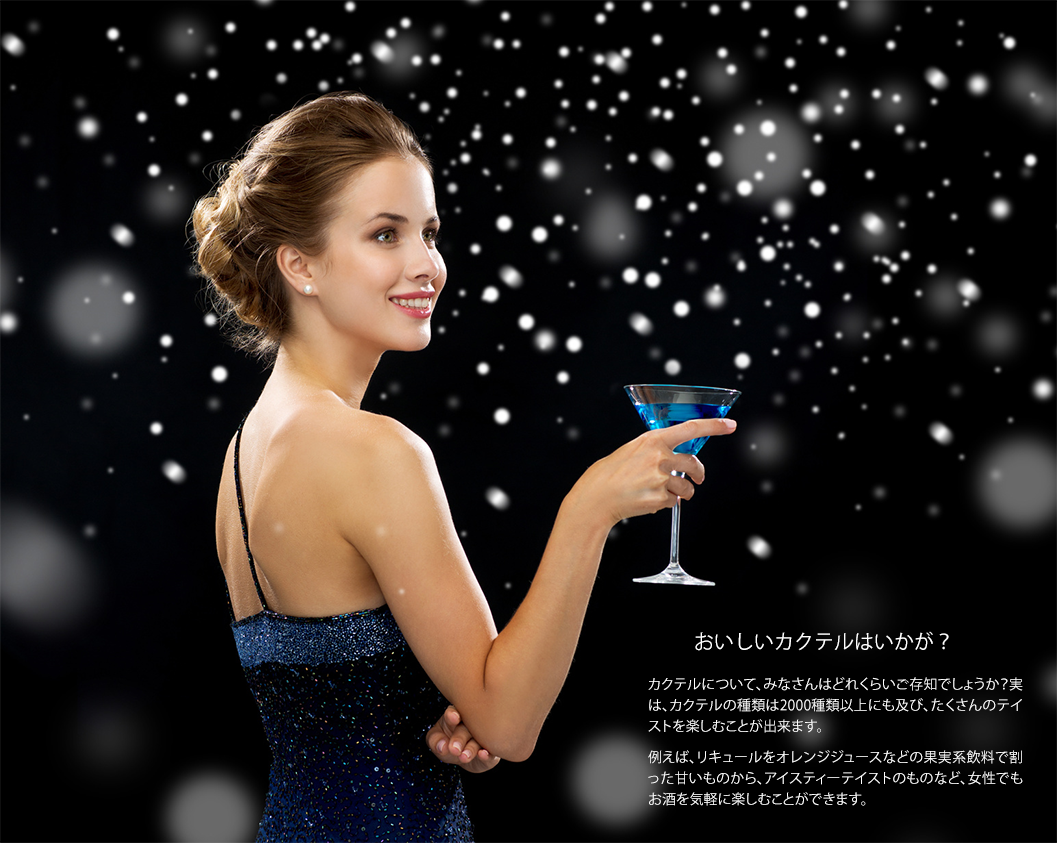
<style>
.page{position:relative;width:1057px;height:843px;background:#000000}
.page>*{position:absolute;margin:0}
.t1{font:20px "KozGoPr6N-Regular";color:#ffffff;text-transform:uppercase}
.t2{font:14px/21px "KozGoPr6N-Regular";color:#ffffff}
</style>
<div class="page">
<p class="t1" style="left:695px;top:631px;width:254px;height:20px">おいしいカクテルはいかが？</p>
<p class="t2" style="left:648px;top:677px;width:375px;height:129px;text-align:justify">カクテルについて、みなさんはどれくらいご存知でしょうか？実は、カクテルの種類は2000種類以上にも及び、たくさんのテイストを楽しむことが出来ます。<br>例えば、リキュールをオレンジジュースなどの果実系飲料で割った甘いものから、アイスティーテイストのものなど、女性でもお酒を気軽に楽しむことができます。</p>
</div>
